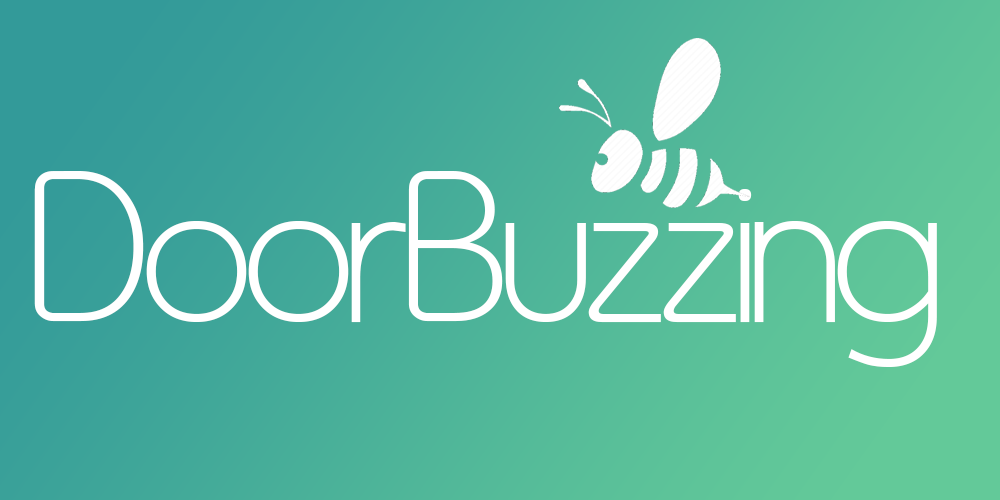
<style>
.page{position:relative;width:1000px;height:500px}
.page>*{position:absolute;margin:0}
.t1{font:250px "Asenine";letter-spacing:-0.025em;color:#ffffff}
</style>
<div class="page">
<p class="t1" style="left:34px;top:171px;width:903px;height:196px">DoorBuzzing</p>
</div>
